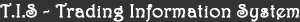
<style>
.page{position:relative;width:300px;height:22px;background:#333333}
.page>*{position:absolute;margin:0}
.t1{font:19.2px "Harrington";color:#ffffff;font-weight:bold}
</style>
<div class="page">
<p class="t1" style="left:0px;top:3px;width:300px;height:19px">T.I.S - Trading Information System</p>
</div>
